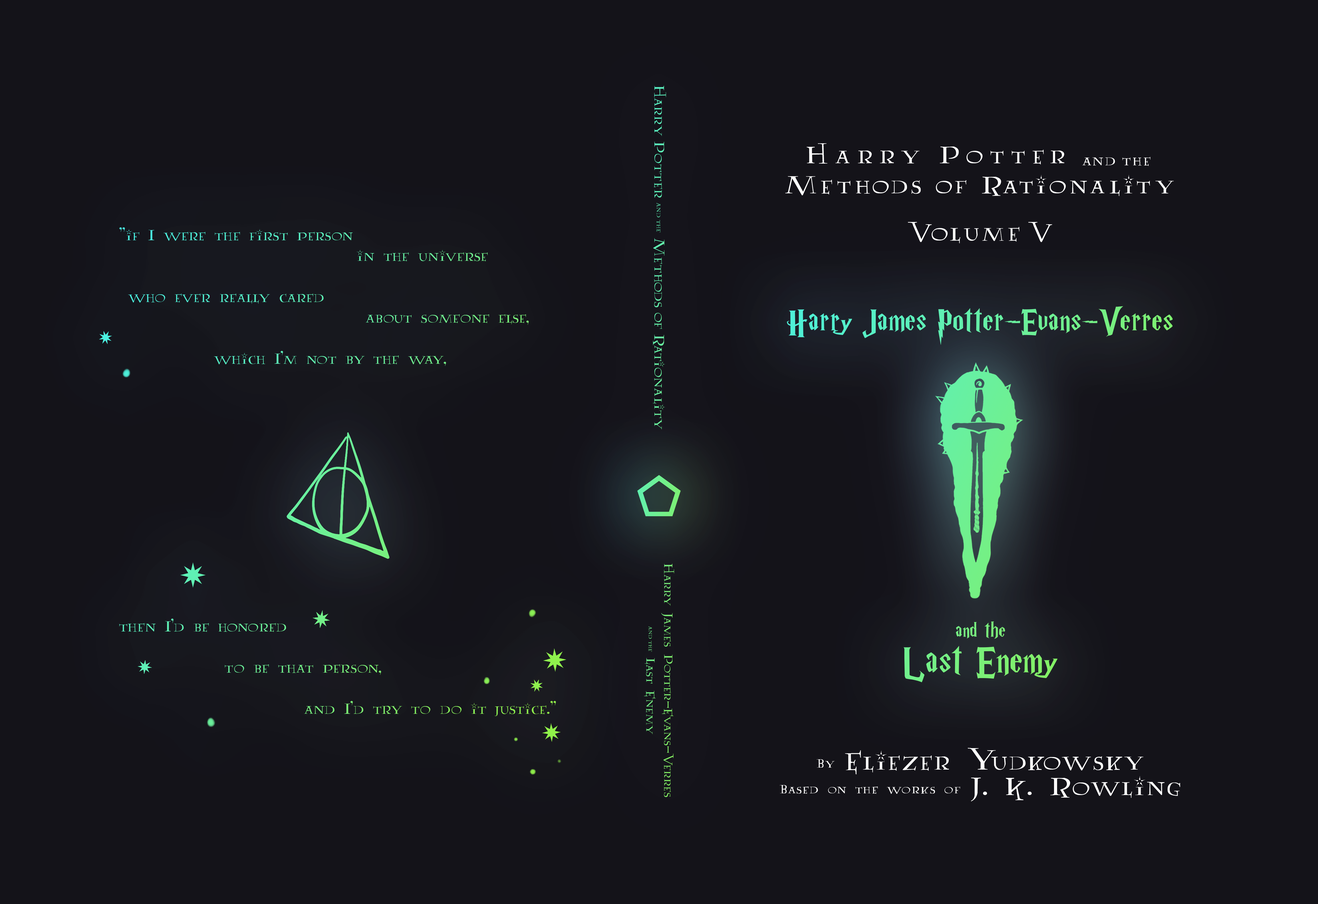
<style>
.page{position:relative;width:1318px;height:904px;background:#141319}
.page>*{position:absolute;margin:0}
.t1{font:16.2px "Lumos";color:#62f0ae}
.t2{font:8.1px "Lumos";color:#62f0ae}
.t3{font:27.8px/30.1px "Lumos";letter-spacing:0.1em;color:#ffffff}
.t4{font:27.8px/19.7px "Lumos";letter-spacing:0.2em;color:#ffffff}
.t5{font:17.2px/19.7px "Lumos";letter-spacing:0.05em;color:#ffffff}
.t6{font:17.2px "AA-Lumos-Caps"}
.t7{font:27.8px "Lumos";letter-spacing:0.1em;color:#ffffff}
.t8{font:35.8px/42.9px "HarryPotterRussianVersionofGfdtk";letter-spacing:0.025em}
.t9{font:22.9px/42.9px "HarryPotterRussianVersionofGfdtk";letter-spacing:0.025em}
.t10{font:42.9px/42.9px "HarryPotterRussianVersionofGfdtk";letter-spacing:0.025em}
.t11{font:13.7px/17.9px "AA-Lumos-Caps";color:#7df073}
.t12{font:6.9px/13.5px "Lumos";color:#7df073}
.t13{font:14.3px/25.5px "AA-Lumos-Caps";letter-spacing:0.05em;color:#ffffff}
.t14{font:28.6px/25.5px "AA-Lumos-Caps";letter-spacing:0.05em;color:#ffffff}
</style>
<div class="page">
<p class="t1" style="left:653px;top:86px;width:13px;height:344px;rotate:90deg">Harry Potter <span class="t2">and the </span>Methods of Rationality</p>
<p class="t3" style="left:785px;top:143px;width:389px;height:53px;text-align:center"><span class="t4">Harry Potter</span><span class="t5">  and the<br></span>Methods of Rationality</p>
<p class="t6" style="left:119px;top:227px;width:437px;height:489px">"if I were the first person <br>                           in the universe <br><br> who ever really cared <br>                            about someone else, <br><br>                          which I'm not by the way, <br> <br><br><br><br><br><br><br><br><br><br><br><br>then I'd be honored <br> <br>            to be that person, <br> <br>                     and I'd try to do it justice."</p>
<p class="t7" style="left:908px;top:222px;width:145px;height:21px">Volume V</p>
<p class="t8" style="left:787px;top:306px;width:386px;height:377px;text-align:center">Harry James Potter-Evans-Verres<br><br><br><br><br><br><br><span class="t9">and the<br></span><span class="t10">Last Enemy</span></p>
<p class="t11" style="left:644px;top:564px;width:30px;height:233px;text-align:center;rotate:90deg">Harry James Potter-Evans-Verres<br><span class="t12">and the   </span>Last Enemy</p>
<p class="t13" style="left:780px;top:748px;width:401px;height:54px;text-align:center">By <span class="t14">Eliezer Yudkowsky<br></span>Based on the works of <span class="t14">J. K. Rowling</span></p>
</div>
